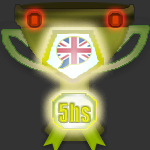
<style>
.page{position:relative;width:150px;height:150px;background:#333333}
.page>*{position:absolute;margin:0}
.t1{font:24.2px "Impact";scale:0.87 1}
</style>
<div class="page">
<p class="t1" style="left:58px;top:102px;width:32px;height:21px">5hs</p>
</div>
